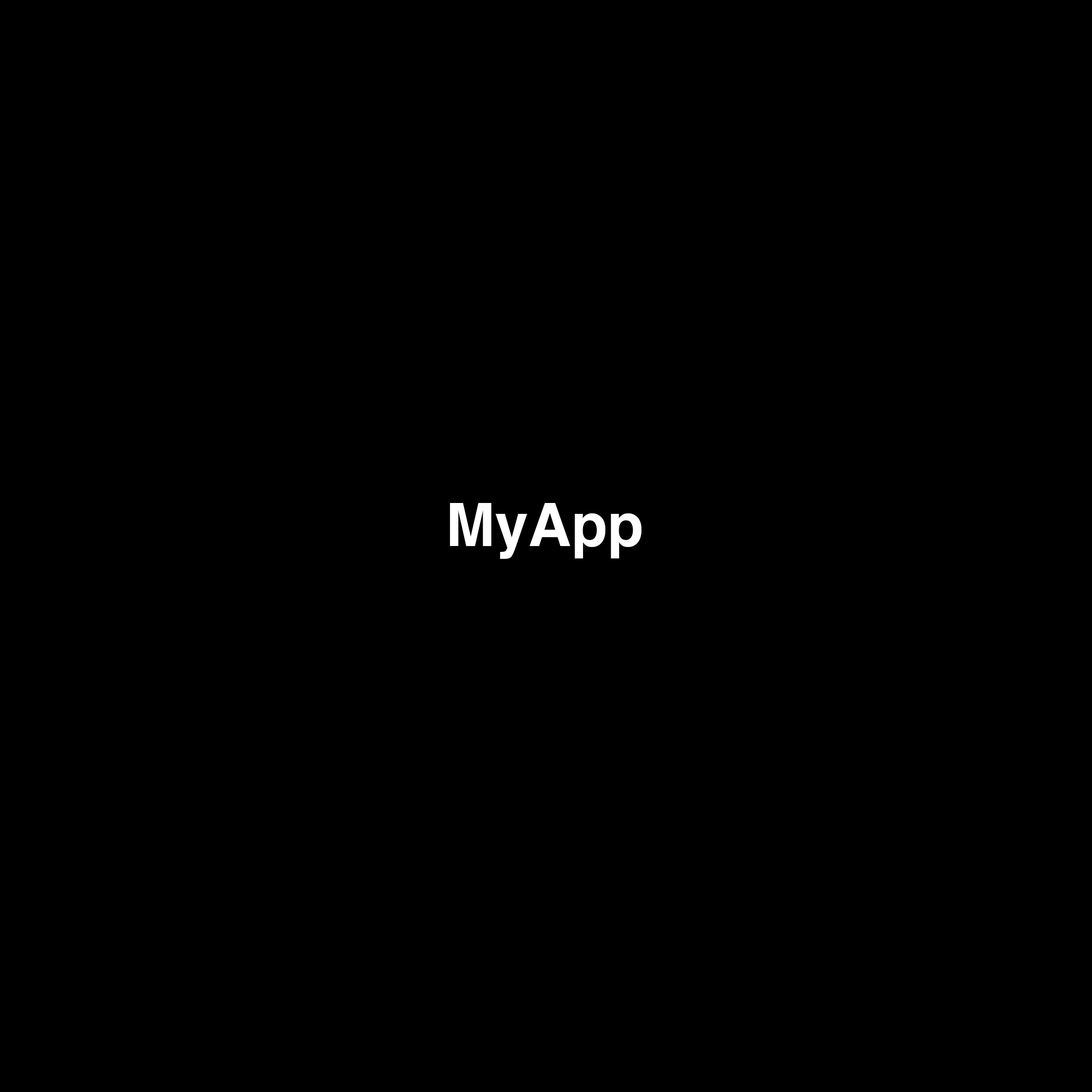
<style>
.page{position:relative;width:1092px;height:1092px;background:#000000}
.page>*{position:absolute;margin:0}
.t1{font:59.3px "Helvetica-Bold";color:#ffffff}
</style>
<div class="page">
<p class="t1" style="left:450px;top:503px;width:191px;height:56px">MyApp</p>
</div>
